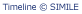
<style>
.page{position:relative;width:82px;height:14px;background:#ffffff}
.page>*{position:absolute;margin:0}
.t1{font:8.3px "Verdana";letter-spacing:-0.025em}
</style>
<div class="page">
<p class="t1" style="left:2px;top:3px;width:77px;height:8px">Timeline © SIMILE</p>
</div>
